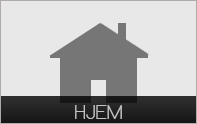
<style>
.page{position:relative;width:197px;height:124px;background:#e8e8e8}
.page>*{position:absolute;margin:0}
.t1{font:18px "Comfortaa-Light";color:#c3c3c3}
</style>
<div class="page">
<p class="t1" style="left:75px;top:105px;width:47px;height:14px">HJEM</p>
</div>
